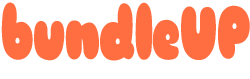
<style>
.page{position:relative;width:250px;height:79px;background:#ffffff}
.page>*{position:absolute;margin:0}
.t1{font:73.9px "Sniglet-ExtraBold";letter-spacing:-0.04em;color:#ff6e40;scale:0.68 1}
</style>
<div class="page">
<p class="t1" style="left:1px;top:2px;width:249px;height:59px">bundleUP</p>
</div>
